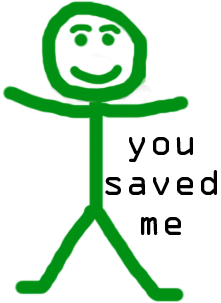
<style>
.page{position:relative;width:221px;height:303px;background:#ffffff}
.page>*{position:absolute;margin:0}
.t1{font:33.3px "OCRAStd";color:#000000}
</style>
<div class="page">
<p class="t1" style="left:105px;top:137px;width:112px;height:98px;text-align:center">you<br>saved<br>me</p>
</div>
